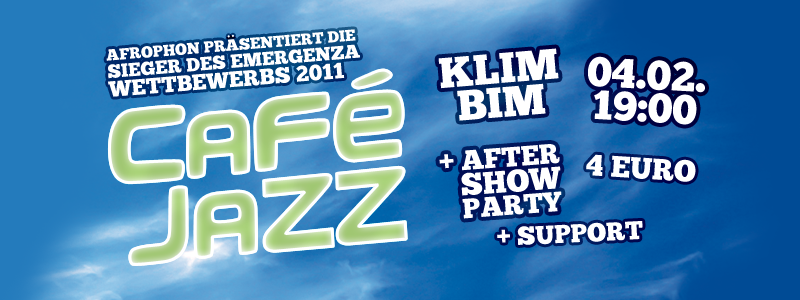
<style>
.page{position:relative;width:800px;height:300px}
.page>*{position:absolute;margin:0}
.t1{font:15.9px/19px "ChunkFive";color:#ffffff}
.t2{font:19px/17.4px "ChunkFive";color:#ffffff;text-transform:uppercase}
.t3{font:22.2px/19px "ChunkFive";color:#ffffff;text-transform:uppercase}
.t4{font:9.6px "ChunkFive";color:#ffffff}
.t5{font:9.6px "ChunkFive"}
.t6{font:42.7px/33.9px "ChunkFive";color:#ffffff}
.t7{font:41.4px/32.9px "ChunkFive";color:#ffffff}
.t8{font:27.8px/22.9px "ChunkFive";color:#ffffff}
.t9{font:31px/25.3px "ChunkFive";color:#ffffff}
.t10{font:29.8px "ChunkFive";color:#ffffff}
.t11{font:25.8px "ChunkFive";color:#ffffff}
</style>
<div class="page">
<p class="t1" style="left:106px;top:29px;width:254px;height:68px;rotate:-5deg">AFROPHON PRASENTIERT DIE <br><span class="t2">Sieger des Emergenza <br></span><span class="t3">Wettbewerbs 2011</span></p>
<p class="t4" style="left:227px;top:35px;width:3px;height:3px;rotate:82deg">.</p>
<p class="t5" style="left:231px;top:34px;width:3px;height:3px;rotate:82deg">.</p>
<p class="t6" style="left:438px;top:48px;width:121px;height:73px;text-align:center;rotate:-5deg">KLIM<br>BIM</p>
<p class="t7" style="left:588px;top:56px;width:117px;height:69px;text-align:center;rotate:3deg">04.02.<br>19:00</p>
<p class="t8" style="left:439px;top:144px;width:123px;height:75px;rotate:-4deg">+ AFTER<br>    <span class="t9">SHOW<br></span>    PARTY</p>
<p class="t10" style="left:586px;top:154px;width:110px;height:28px;rotate:4deg">4 EURO</p>
<p class="t11" style="left:497px;top:221px;width:146px;height:24px;rotate:-3deg">+ SUPPORT</p>
</div>
